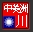
<style>
.page{position:relative;width:33px;height:32px;background:#f20000}
.page>*{position:absolute;margin:0}
.t1{font:10.4px "SimSun";letter-spacing:-0.25em;color:#ffffff}
.t2{font:11.7px "SimSun";color:#ffffff}
</style>
<div class="page">
<p class="t1" style="left:4px;top:4px;width:24px;height:9px">中美洲</p>
<p class="t2" style="left:16px;top:15px;width:11px;height:12px">川</p>
</div>
